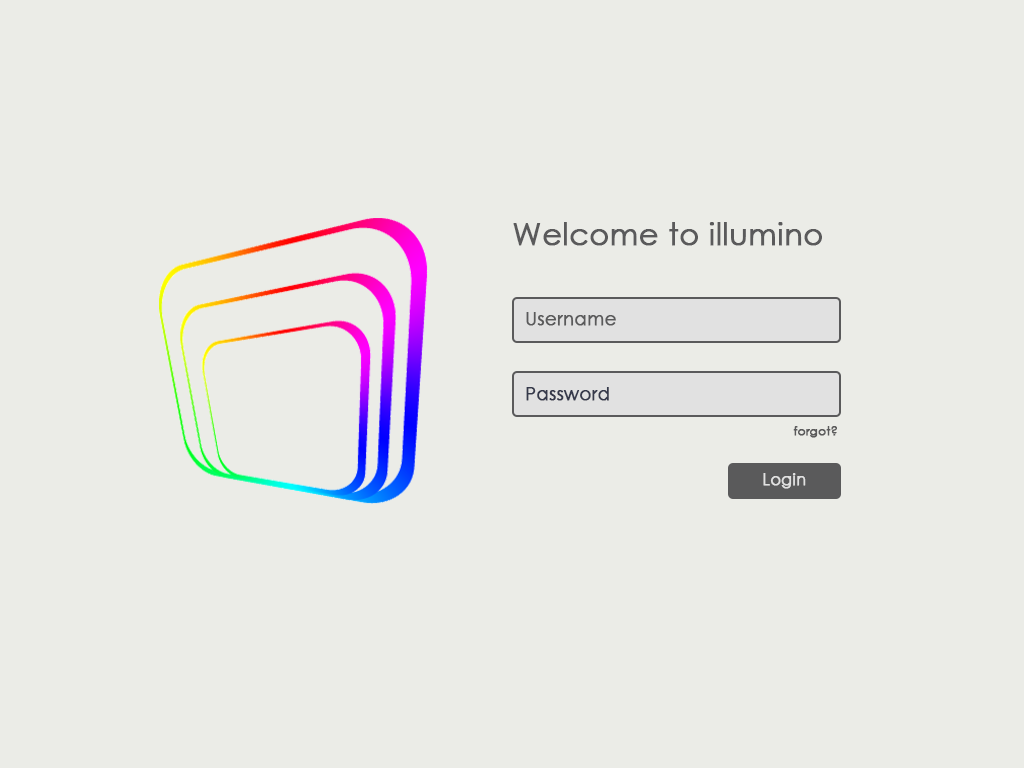
<style>
.page{position:relative;width:1024px;height:768px;background:#ebece7}
.page>*{position:absolute;margin:0}
.t1{font:30px "CenturyGothic";color:#5a5a5b;font-weight:bold}
.t2{font:18px "CenturyGothic";color:#5a5a5b;font-weight:bold}
.t3{font:18px "CenturyGothic";color:#35394b;font-weight:bold}
.t4{font:12px "CenturyGothic";color:#5a5a5b;font-weight:bold}
.t5{font:16px "CenturyGothic";color:#e1e1e1;font-weight:bold}
</style>
<div class="page">
<p class="t1" style="left:513px;top:222px;width:309px;height:24px">Welcome to illumino</p>
<p class="t2" style="left:526px;top:312px;width:90px;height:14px">Username</p>
<p class="t3" style="left:526px;top:387px;width:83px;height:14px">Password</p>
<p class="t4" style="left:793px;top:426px;width:44px;height:12px">forgot?</p>
<p class="t5" style="left:763px;top:473px;width:43px;height:16px">Login</p>
</div>
